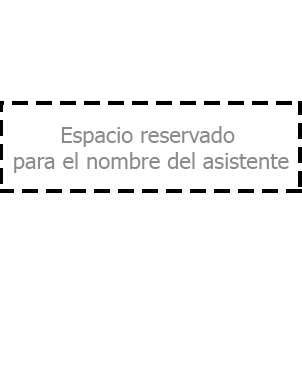
<style>
.page{position:relative;width:302px;height:377px;background:#ffffff}
.page>*{position:absolute;margin:0}
.t1{font:22px "Tahoma";color:#8c8b8b}
</style>
<div class="page">
<p class="t1" style="left:14px;top:126px;width:275px;height:47px;text-align:center">Espacio reservado <br>para el nombre del asistente</p>
</div>
